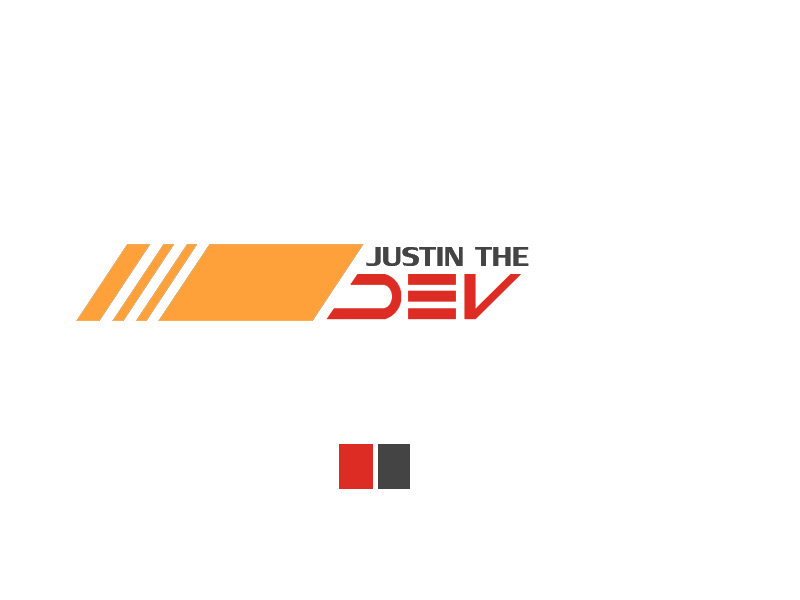
<style>
.page{position:relative;width:800px;height:600px;background:#ffffff}
.page>*{position:absolute;margin:0}
.t1{font:40.7px "LilyUPC";color:#444444;scale:1.14 1}
</style>
<div class="page">
<p class="t1" style="left:366px;top:247px;width:163px;height:19px">JUSTIN THE</p>
</div>
